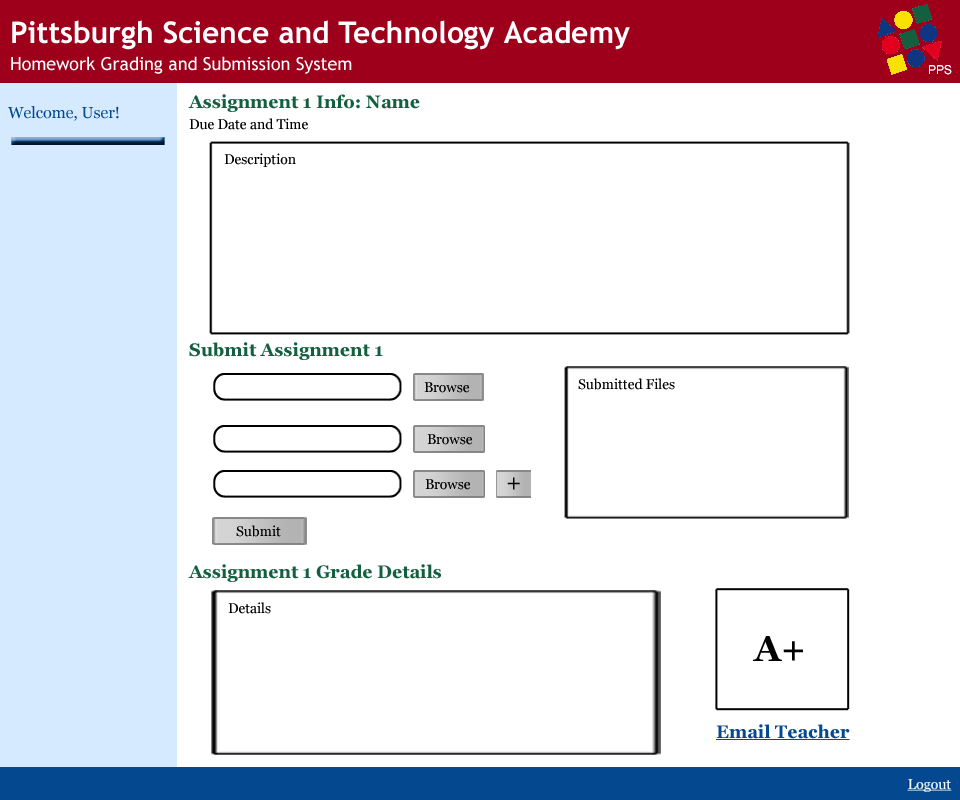
<style>
.page{position:relative;width:960px;height:800px;background:#ffffff}
.page>*{position:absolute;margin:0}
.t1{font:17.9px "Georgia-Bold";color:#145f40}
.t2{font:15.9px "Georgia";color:#044990}
.t3{font:13.9px "Georgia";color:#000000}
.t4{font:23.9px "Georgia";color:#000000}
.t5{font:35.9px "Georgia-Bold";color:#000000}
.t6{font:17.9px "Georgia-Bold";color:#044990;text-decoration:underline}
</style>
<div class="page">
<p class="t1" style="left:188px;top:94px;width:232px;height:18px">Assignment 1 Info: Name</p>
<p class="t2" style="left:8px;top:106px;width:111px;height:15px">Welcome, User!</p>
<p class="t3" style="left:189px;top:118px;width:119px;height:12px">Due Date and Time</p>
<p class="t3" style="left:224px;top:153px;width:72px;height:14px">Description</p>
<p class="t1" style="left:189px;top:342px;width:194px;height:18px">Submit Assignment 1</p>
<p class="t3" style="left:424px;top:382px;width:46px;height:11px">Browse</p>
<p class="t3" style="left:578px;top:378px;width:97px;height:12px">Submitted Files</p>
<p class="t3" style="left:427px;top:434px;width:46px;height:11px">Browse</p>
<p class="t3" style="left:425px;top:479px;width:46px;height:11px">Browse</p>
<p class="t4" style="left:507px;top:477px;width:13px;height:13px">+</p>
<p class="t3" style="left:236px;top:525px;width:45px;height:12px">Submit</p>
<p class="t1" style="left:188px;top:564px;width:253px;height:18px">Assignment 1 Grade Details</p>
<p class="t3" style="left:228px;top:602px;width:43px;height:12px">Details</p>
<p class="t5" style="left:753px;top:636px;width:50px;height:25px">A+</p>
<p class="t6" style="left:716px;top:724px;width:134px;height:16px">Email Teacher</p>
</div>
